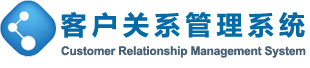
<style>
.page{position:relative;width:310px;height:68px;background:#ffffff}
.page>*{position:absolute;margin:0}
.t1{font:26px "MicrosoftYaHei-Bold";letter-spacing:0.2em;color:#056aa5}
.t2{font:12px "Arial-BoldMT";letter-spacing:-0.02em;color:#486174}
</style>
<div class="page">
<p class="t1" style="left:60px;top:12px;width:245px;height:26px">客户关系管理系统</p>
<p class="t2" style="left:61px;top:46px;width:245px;height:12px">Customer Relationship Management System</p>
</div>
